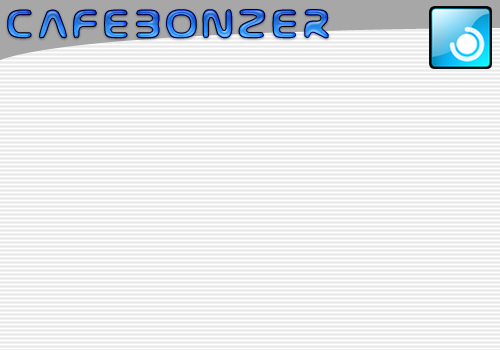
<style>
.page{position:relative;width:500px;height:350px;background:#f0f0f0}
.page>*{position:absolute;margin:0}
.t1{font:48px "Nasal";letter-spacing:0.1em}
</style>
<div class="page">
<p class="t1" style="left:7px;top:9px;width:322px;height:30px">CafeBonzer</p>
</div>
